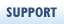
<style>
.page{position:relative;width:64px;height:24px}
.page>*{position:absolute;margin:0}
.t1{font:14px "Humanist521BT-BoldCondensed";color:#2d5078}
</style>
<div class="page">
<p class="t1" style="left:6px;top:7px;width:51px;height:10px">SUPPORT</p>
</div>
